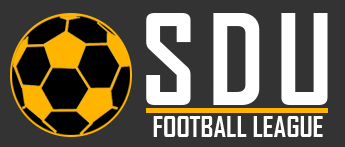
<style>
.page{position:relative;width:345px;height:147px;background:#333333}
.page>*{position:absolute;margin:0}
.t1{font:120px "AgencyFB-Bold";letter-spacing:0.1em;color:#ffffff}
.t2{font:27px "AgencyFB-Bold";color:#ffffff;scale:1.03 1}
</style>
<div class="page">
<p class="t1" style="left:146px;top:13px;width:182px;height:92px">SDU</p>
<p class="t2" style="left:153px;top:116px;width:170px;height:21px">FOOTBALL LEAGUE</p>
</div>
